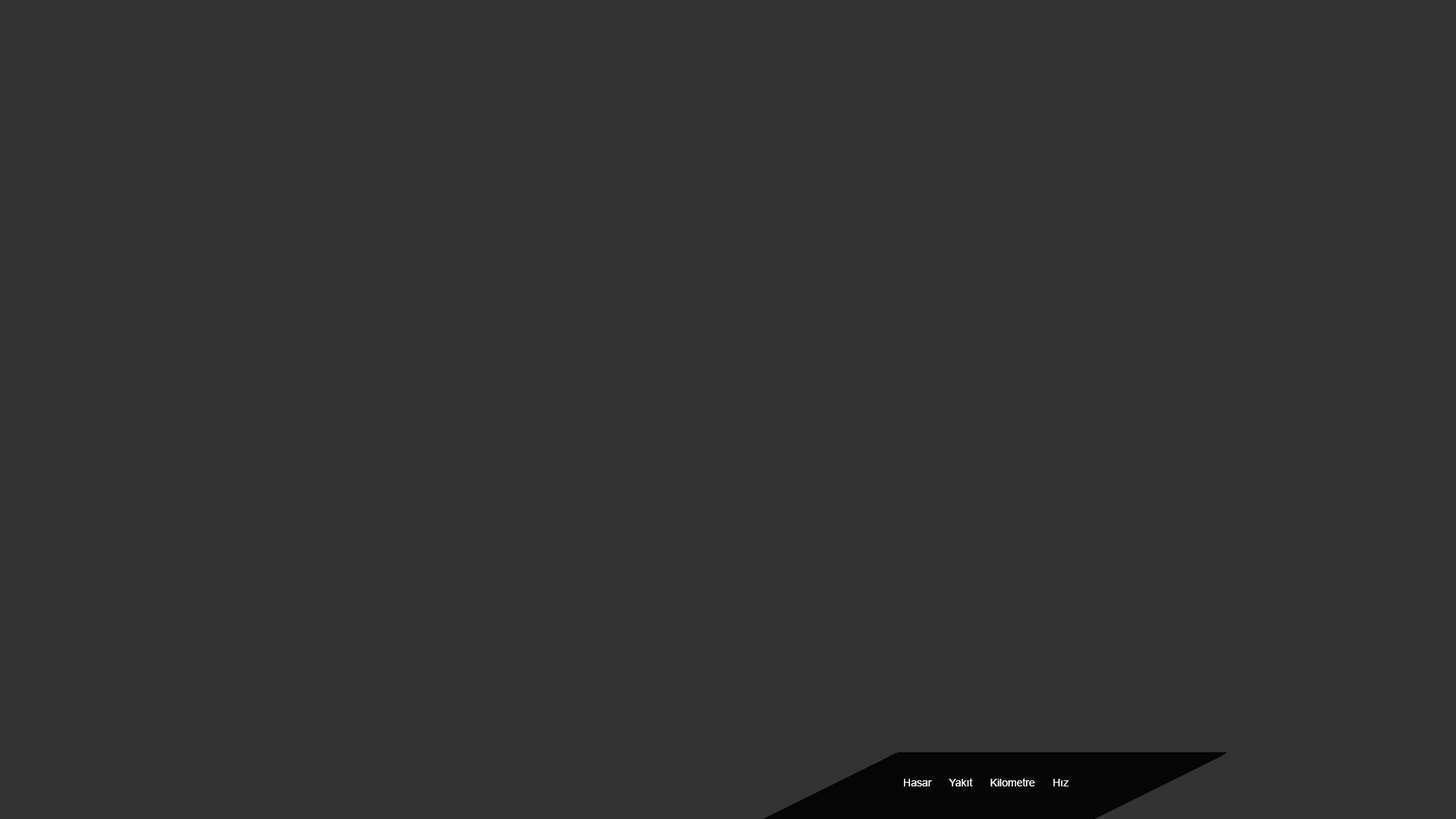
<style>
.page{position:relative;width:1456px;height:819px;background:#333333}
.page>*{position:absolute;margin:0}
.t1{font:10.6px "ArialMT";color:#ffffff}
</style>
<div class="page">
<p class="t1" style="left:904px;top:778px;width:165px;height:8px">Hasar      Yakıt      Kilometre      Hız</p>
</div>
